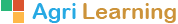
<style>
.page{position:relative;width:178px;height:24px;background:#ffffff}
.page>*{position:absolute;margin:0}
.t1{font:22px "ArialRoundedMTBold";color:#27a9e3}
.t2{font:22px "ArialRoundedMTBold";color:#cc933a}
</style>
<div class="page">
<p class="t1" style="left:32px;top:3px;width:44px;height:20px">Agri</p>
<p class="t2" style="left:83px;top:3px;width:93px;height:20px">Learning</p>
</div>
